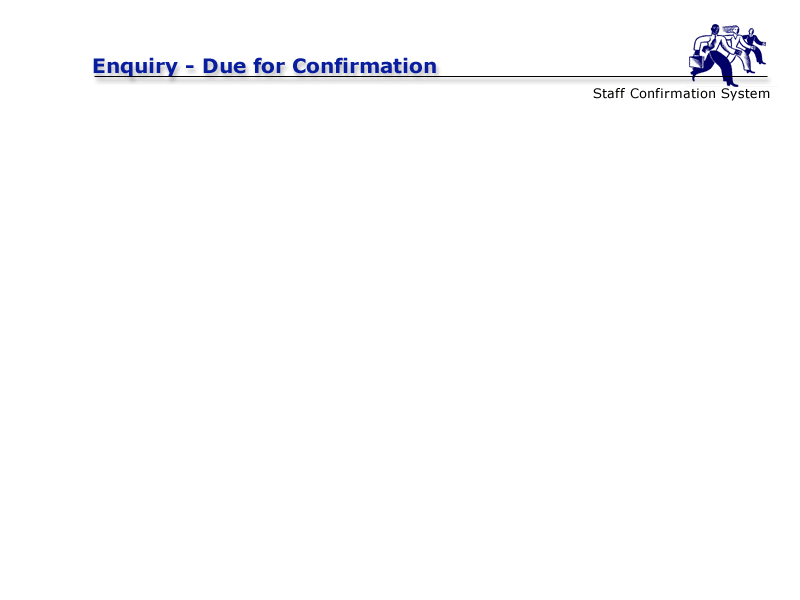
<style>
.page{position:relative;width:800px;height:600px;background:#ffffff}
.page>*{position:absolute;margin:0}
.t1{font:20px "Verdana-Bold";color:#091e9e}
.t2{font:13px "Verdana";color:#030100}
</style>
<div class="page">
<p class="t1" style="left:93px;top:57px;width:343px;height:20px">Enquiry - Due for Confirmation</p>
<p class="t2" style="left:593px;top:88px;width:177px;height:13px">Staff Confirmation System</p>
</div>
